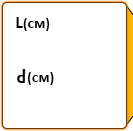
<style>
.page{position:relative;width:133px;height:131px;background:#ffffff}
.page>*{position:absolute;margin:0}
.t1{font:14px "Calibri-Bold";letter-spacing:0.01em;color:#000000;font-variant:small-caps}
.t2{font:18px "Calibri-Bold";letter-spacing:0.01em;color:#000000;font-variant:small-caps}
</style>
<div class="page">
<p class="t1" style="left:16px;top:17px;width:34px;height:14px"><span class="t2">L</span>(см)</p>
<p class="t1" style="left:27px;top:72px;width:27px;height:13px">(см)</p>
</div>
